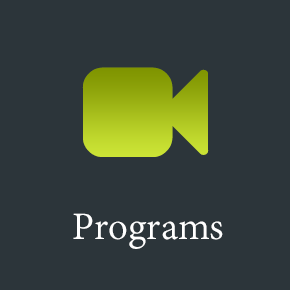
<style>
.page{position:relative;width:290px;height:290px;background:#2c353a}
.page>*{position:absolute;margin:0}
.t1{font:42px "AdobeDevanagari-Regular";color:#ffffff}
</style>
<div class="page">
<p class="t1" style="left:73px;top:213px;width:150px;height:36px">Programs</p>
</div>
